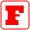
<style>
.page{position:relative;width:30px;height:30px;background:#ffffff}
.page>*{position:absolute;margin:0}
.t1{font:27px "Ultra-Regular";color:#ff0000}
</style>
<div class="page">
<p class="t1" style="left:5px;top:5px;width:19px;height:20px">F</p>
</div>
